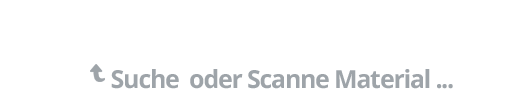
<style>
.page{position:relative;width:506px;height:101px;background:#ffffff}
.page>*{position:absolute;margin:0}
.t1{font:25px "OpenSans-Bold";letter-spacing:-0.05em;color:#9ea4a9}
</style>
<div class="page">
<p class="t1" style="left:111px;top:69px;width:342px;height:20px">Suche  oder Scanne Material ...</p>
</div>
